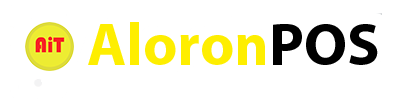
<style>
.page{position:relative;width:400px;height:100px;background:#ffffff}
.page>*{position:absolute;margin:0}
.t1{font:60px "MyriadHebrew-Bold";color:#feee00}
.t2{font:60px "MyriadHebrew-Bold";color:#000000}
</style>
<div class="page">
<p class="t1" style="left:88px;top:22px;width:290px;height:43px">Aloron<span class="t2">POS</span></p>
</div>
